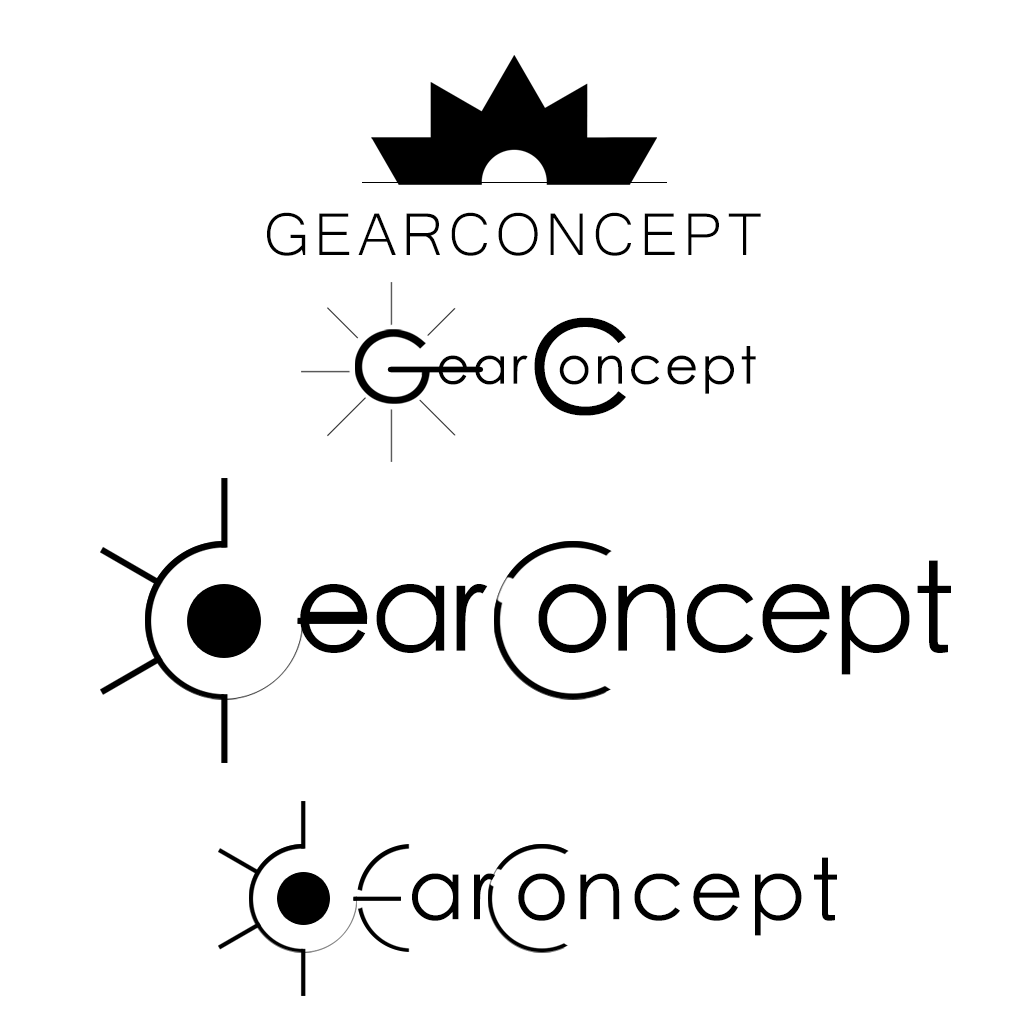
<style>
.page{position:relative;width:1024px;height:1024px;background:#ffffff}
.page>*{position:absolute;margin:0}
.t1{font:77.2px "Microsoft-Yi-Baiti";letter-spacing:0.06em;color:#000000}
.t2{font:129.5px "CenturyGothic";letter-spacing:0.06em;color:#000000}
.t3{font:51.4px "CenturyGothic";letter-spacing:0.06em;color:#000000}
.t4{font:122.3px "STHeitiTC-Light";letter-spacing:-0.026em;color:#000000}
.t5{font:83.6px "STHeitiTC-Light";letter-spacing:0.06em;color:#000000}
</style>
<div class="page">
<p class="t1" style="left:267px;top:212px;width:494px;height:44px">GEARCONCEPT</p>
<p class="t2" style="left:534px;top:317px;width:92px;height:99px">C</p>
<p class="t3" style="left:438px;top:346px;width:318px;height:48px">ear oncept</p>
<p class="t4" style="left:538px;top:560px;width:413px;height:115px">oncept</p>
<p class="t4" style="left:300px;top:584px;width:188px;height:69px">ear</p>
<p class="t5" style="left:518px;top:857px;width:319px;height:79px">oncept</p>
<p class="t5" style="left:412px;top:873px;width:83px;height:48px">ar</p>
</div>
